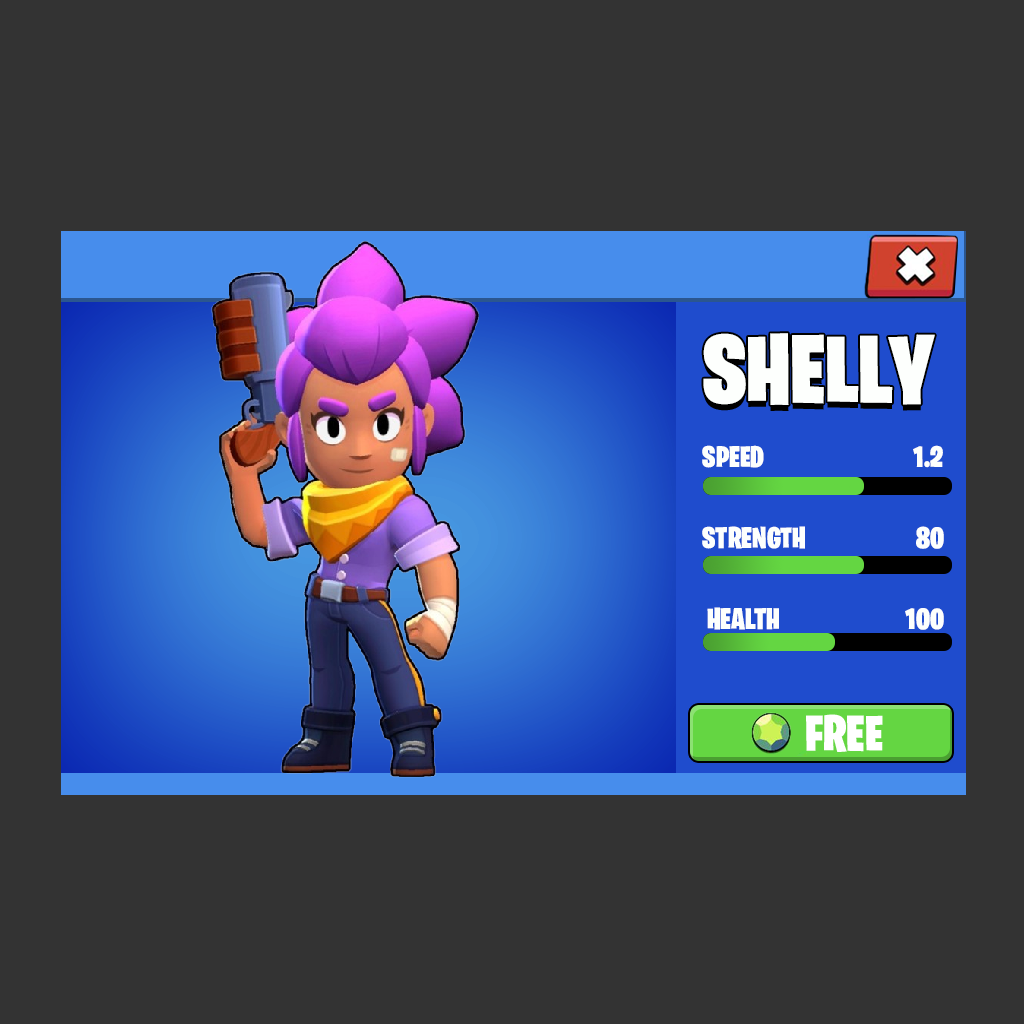
<style>
.page{position:relative;width:1024px;height:1024px;background:#333333}
.page>*{position:absolute;margin:0}
.t1{font:97.7px "BurbankBigCondensed-Black";color:#fdfffd}
.t2{font:30px "BurbankBigCondensed-Black";color:#fdfffd}
</style>
<div class="page">
<p class="t1" style="left:703px;top:333px;width:232px;height:72px">SHELLY</p>
<p class="t2" style="left:702px;top:445px;width:62px;height:23px">SPEED</p>
<p class="t2" style="left:913px;top:445px;width:30px;height:23px">1.2</p>
<p class="t2" style="left:702px;top:526px;width:103px;height:23px">STRENGTH</p>
<p class="t2" style="left:916px;top:526px;width:28px;height:23px">80</p>
<p class="t2" style="left:707px;top:607px;width:72px;height:23px">HEALTH</p>
<p class="t2" style="left:905px;top:608px;width:39px;height:22px">100</p>
</div>
